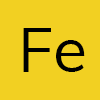
<style>
.page{position:relative;width:100px;height:100px;background:#f2d022}
.page>*{position:absolute;margin:0}
.t1{font:62.5px "Muli-Regular";color:#000000}
</style>
<div class="page">
<p class="t1" style="left:23px;top:28px;width:62px;height:44px">Fe</p>
</div>
